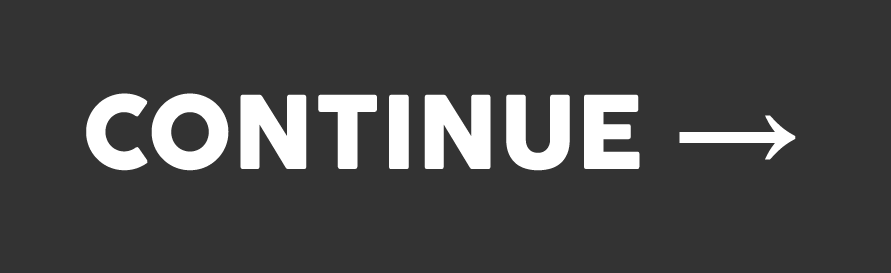
<style>
.page{position:relative;width:891px;height:273px;background:#333333}
.page>*{position:absolute;margin:0}
.t1{font:100px "Cocogoose";color:#ffffff}
.t2{font:125px "Haettenschweiler";color:#ffffff}
</style>
<div class="page">
<p class="t1" style="left:86px;top:93px;width:710px;height:78px">CONTINUE <span class="t2">→</span></p>
</div>
